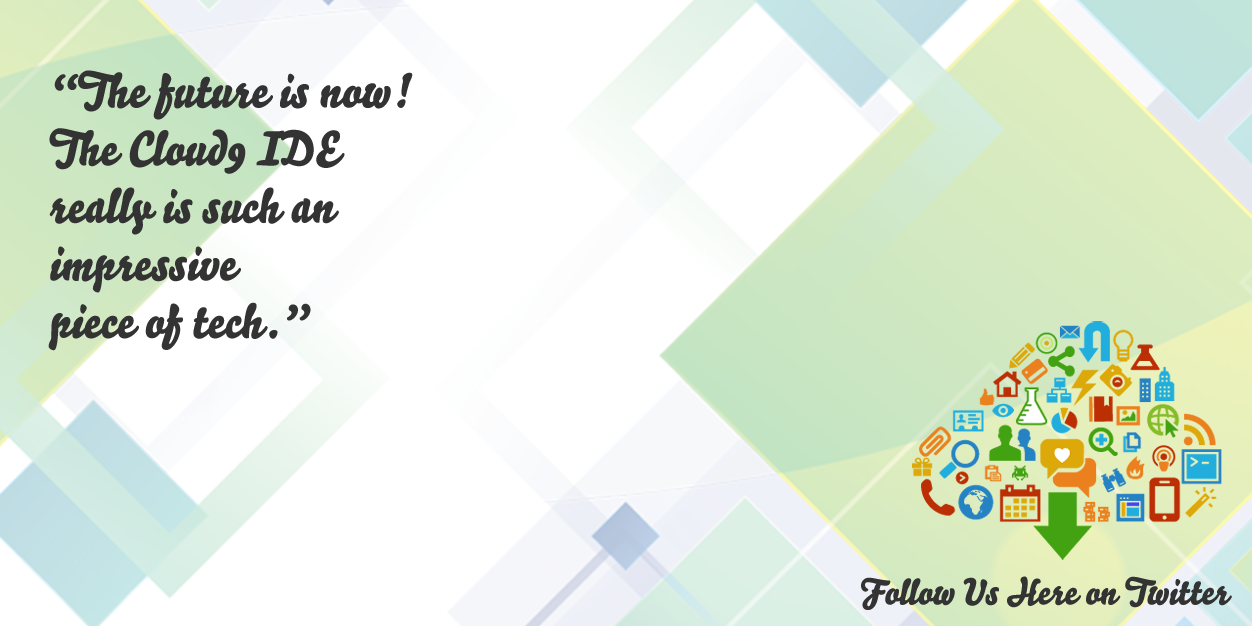
<style>
.page{position:relative;width:1252px;height:626px;background:#ffffff}
.page>*{position:absolute;margin:0}
.t1{font:48px "Bello-Script";color:#333333}
.t2{font:36px "Bello-Script";color:#333333}
</style>
<div class="page">
<p class="t1" style="left:48px;top:70px;width:365px;height:281px">“The future is now! <br>The Cloud9 IDE <br>really is such an <br>impressive <br>piece of tech.”</p>
<p class="t2" style="left:861px;top:576px;width:371px;height:34px">Follow Us Here on Twitter</p>
</div>
